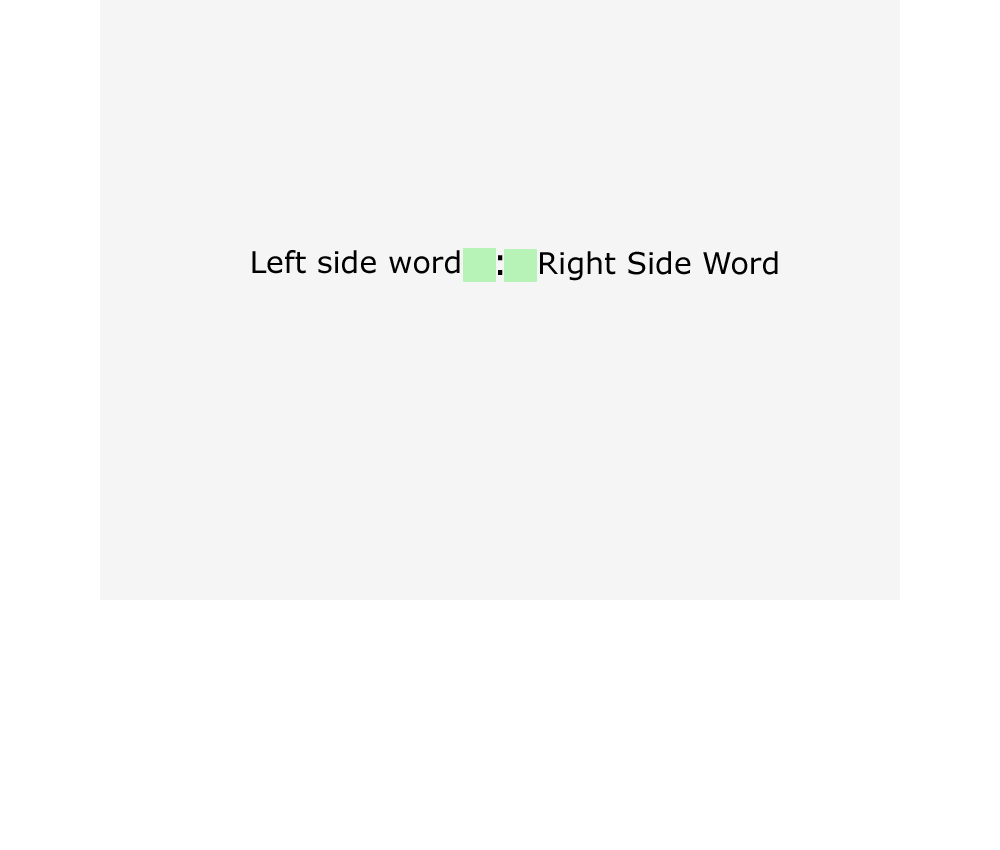
<style>
.page{position:relative;width:1000px;height:850px;background:#f5f5f5}
.page>*{position:absolute;margin:0}
.t1{font:30px "Verdana";color:#000000}
.t2{font:36px "Verdana";color:#000000}
</style>
<div class="page">
<p class="t1" style="left:252px;top:250px;width:208px;height:24px">Left side word</p>
<p class="t2" style="left:498px;top:255px;width:5px;height:20px">:</p>
<p class="t1" style="left:540px;top:251px;width:238px;height:30px">Right Side Word</p>
</div>
